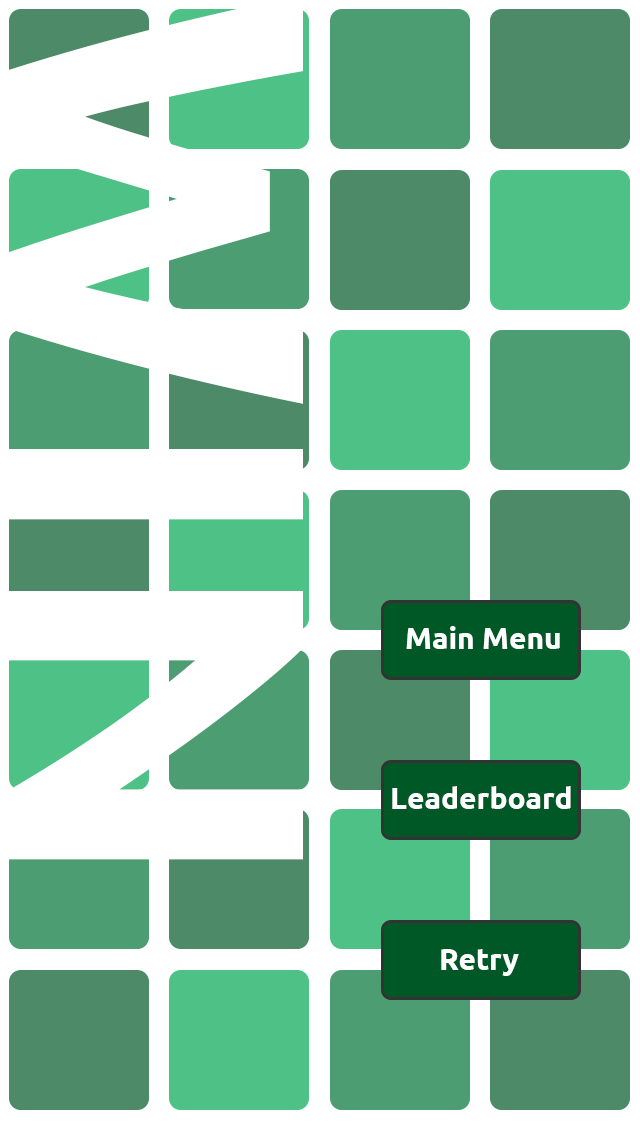
<style>
.page{position:relative;width:640px;height:1136px;background:#ffffff}
.page>*{position:absolute;margin:0}
.t1{font:30px "Ubuntu-Bold";color:#ffffff}
</style>
<div class="page">
<p class="t1" style="left:406px;top:626px;width:154px;height:23px">Main Menu</p>
<p class="t1" style="left:392px;top:786px;width:179px;height:23px">Leaderboard</p>
<p class="t1" style="left:441px;top:949px;width:78px;height:27px">Retry</p>
</div>
